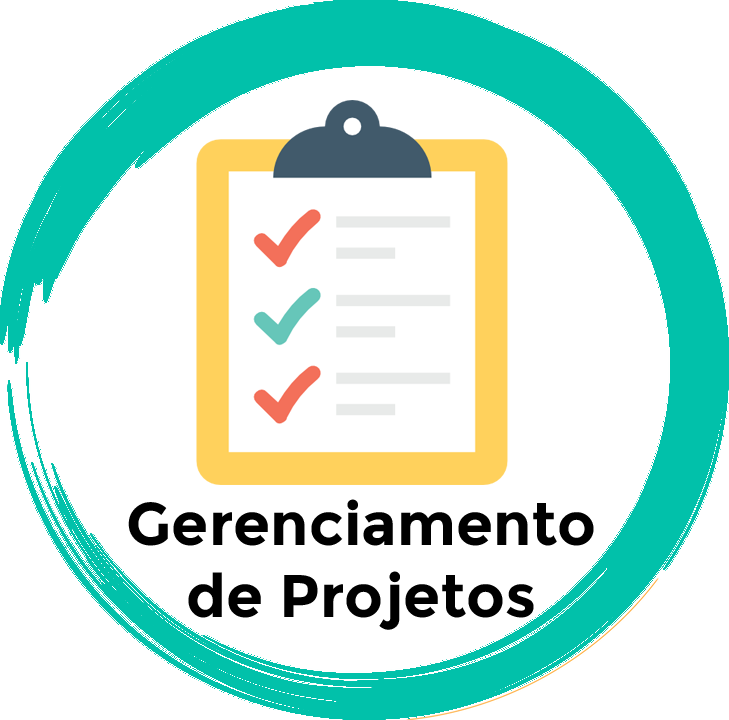
<style>
.page{position:relative;width:729px;height:720px;background:#ffffff}
.page>*{position:absolute;margin:0}
.t1{font:60px "Montserrat-Bold";color:#000000}
</style>
<div class="page">
<p class="t1" style="left:128px;top:499px;width:466px;height:131px;text-align:center">Gerenciamento<br>de Projetos</p>
</div>
